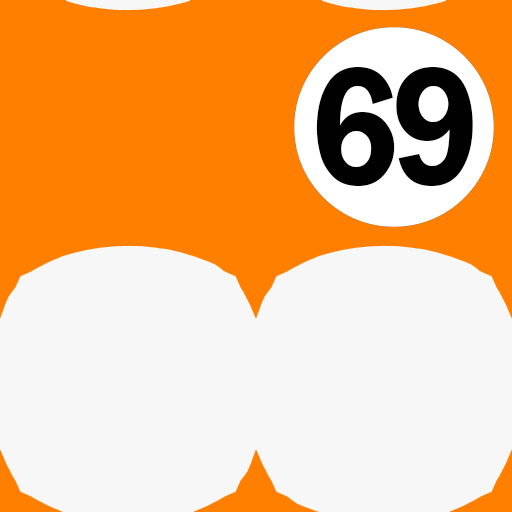
<style>
.page{position:relative;width:512px;height:512px;background:#f7f7f7}
.page>*{position:absolute;margin:0}
.t1{font:172.5px "FranklinGothic-Demi";letter-spacing:-0.05em;color:#010101;scale:0.87 1}
</style>
<div class="page">
<p class="t1" style="left:316px;top:67px;width:157px;height:119px">69</p>
</div>
